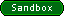
<style>
.page{position:relative;width:64px;height:16px;background:#006b11}
.page>*{position:absolute;margin:0}
.t1{font:10px "DroidSansMono";color:#ffffff}
</style>
<div class="page">
<p class="t1" style="left:12px;top:4px;width:40px;height:7px">Sandbox</p>
</div>
